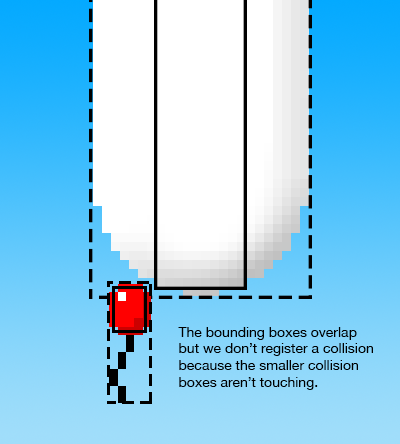
<style>
.page{position:relative;width:400px;height:444px;background:#ffffff}
.page>*{position:absolute;margin:0}
.t1{font:14px "HelveticaNeue";color:#000000}
</style>
<div class="page">
<p class="t1" style="left:178px;top:327px;width:195px;height:63px">The bounding boxes overlap<br>but we don’t register a collision<br>because the smaller collision<br>boxes aren’t touching.</p>
</div>
